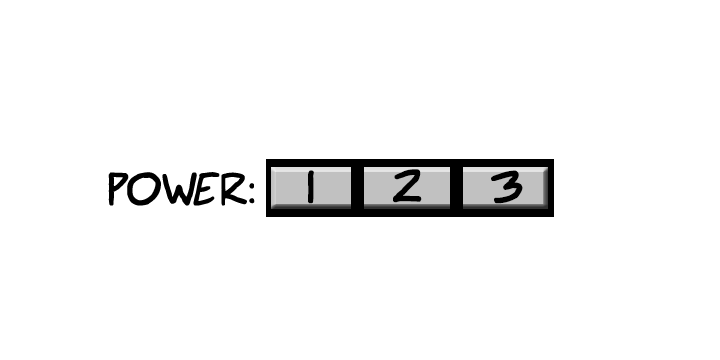
<style>
.page{position:relative;width:720px;height:360px;background:#ffffff}
.page>*{position:absolute;margin:0}
.t1{font:48px "SuperWebcomicBros.";color:#000000}
.t2{font:24px "SuperWebcomicBros.";color:#000000}
</style>
<div class="page">
<p class="t1" style="left:108px;top:172px;width:147px;height:34px"><span class="t2"><br></span>    Power:</p>
<p class="t1" style="left:308px;top:170px;width:6px;height:34px">1</p>
<p class="t1" style="left:393px;top:169px;width:29px;height:34px">2</p>
<p class="t1" style="left:491px;top:170px;width:32px;height:34px">3</p>
</div>
